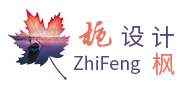
<style>
.page{position:relative;width:188px;height:88px;background:#ffffff}
.page>*{position:absolute;margin:0}
.t1{font:42px "SCFXJH";color:#ea7464}
.t2{font:24px "SourceHanSansCN-Normal";color:#56487b}
.t3{font:24px "SourceHanSansCN-Normal";color:#ea7464}
.t4{font:18px "SourceHanSansCN-Normal";color:#56487b}
</style>
<div class="page">
<p class="t1" style="left:78px;top:21px;width:34px;height:26px">栀</p>
<p class="t2" style="left:121px;top:25px;width:23px;height:22px">设</p>
<p class="t2" style="left:152px;top:26px;width:22px;height:23px">计</p>
<p class="t3" style="left:152px;top:52px;width:23px;height:24px">枫</p>
<p class="t4" style="left:73px;top:55px;width:67px;height:19px">ZhiFeng</p>
</div>
